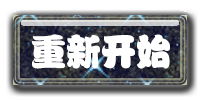
<style>
.page{position:relative;width:200px;height:100px;background:#ffffff}
.page>*{position:absolute;margin:0}
.t1{font:36.1px "FZPWK--GBK1-0";color:#ffffff}
</style>
<div class="page">
<p class="t1" style="left:32px;top:34px;width:138px;height:35px">重新开始</p>
</div>
